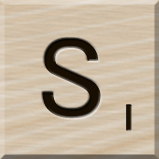
<style>
.page{position:relative;width:159px;height:159px}
.page>*{position:absolute;margin:0}
.t1{font:116px "MS-UIGothic";color:#180e01}
.t2{font:36px "GillSansMT";color:#1c1101;font-weight:bold;scale:1.1 1}
</style>
<div class="page">
<p class="t1" style="left:42px;top:38px;width:59px;height:81px">S</p>
<p class="t2" style="left:126px;top:104px;width:6px;height:27px">1</p>
</div>
